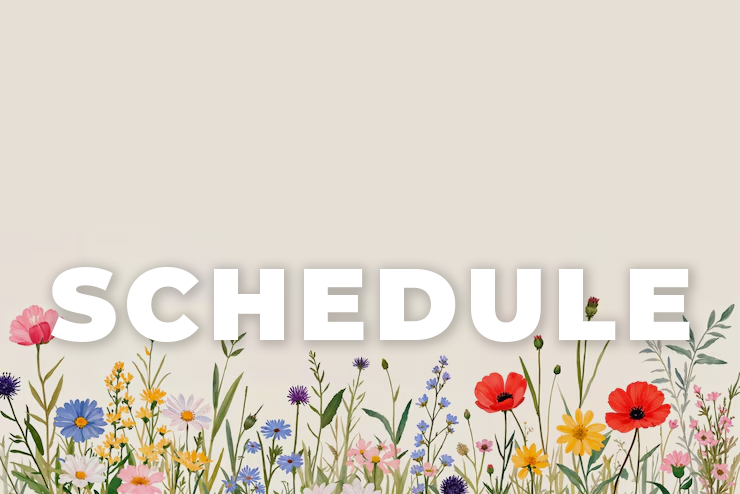
<style>
.page{position:relative;width:740px;height:494px;background:#e5dfd6}
.page>*{position:absolute;margin:0}
.t1{font:174.9px "Montserrat-Black";letter-spacing:0.075em;color:#ffffff;text-transform:uppercase}
</style>
<div class="page">
<p class="t1" style="left:51px;top:267px;width:639px;height:75px">Schedule</p>
</div>
